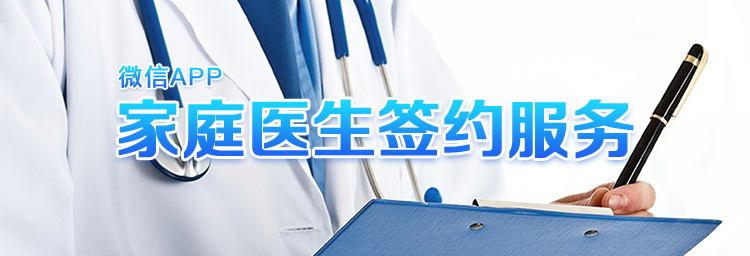
<style>
.page{position:relative;width:750px;height:256px}
.page>*{position:absolute;margin:0}
.t1{font:24px "PingFangSC-Regular";letter-spacing:0.05em;font-weight:bold}
.t2{font:64px "FZZZHONGJW--GB1-0";letter-spacing:-0.01em;font-weight:bold}
</style>
<div class="page">
<p class="t1" style="left:118px;top:65px;width:104px;height:23px">微信APP</p>
<p class="t2" style="left:118px;top:99px;width:516px;height:60px">家庭医生签约服务</p>
</div>
